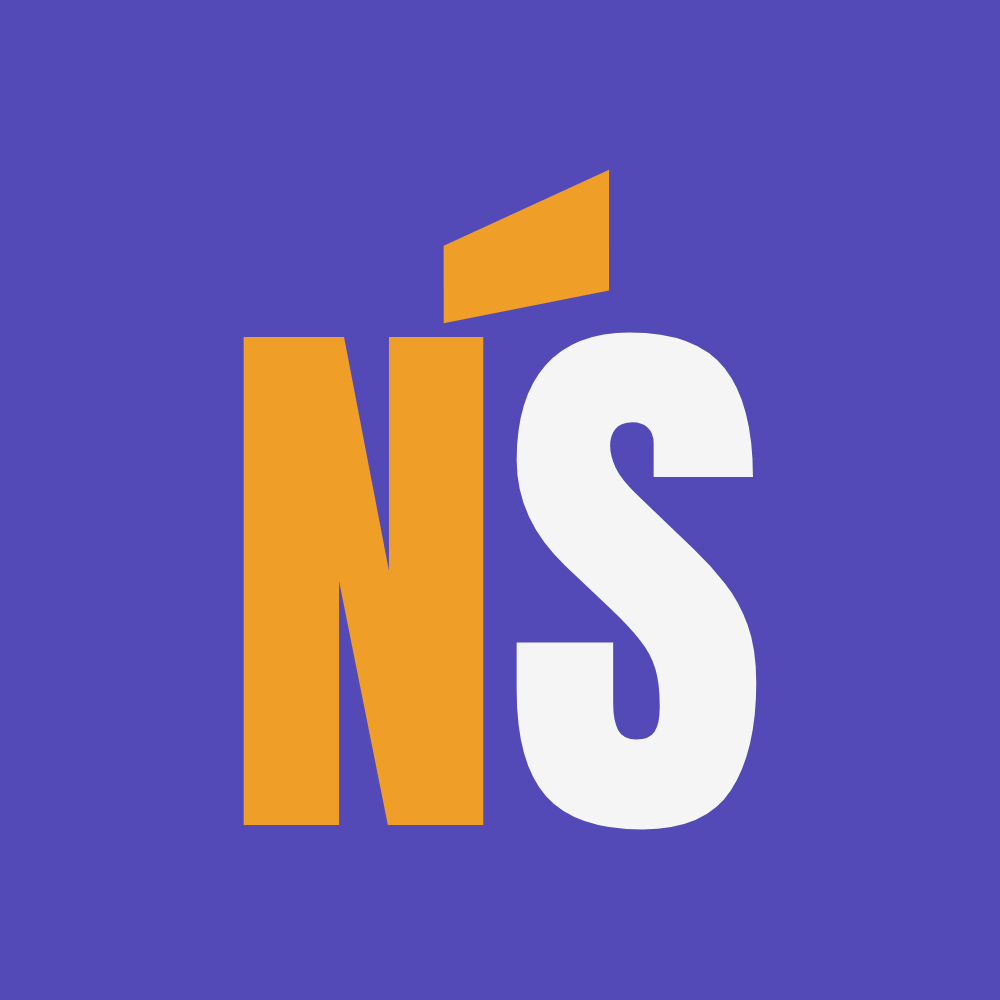
<style>
.page{position:relative;width:1000px;height:1000px;background:#534ab7}
.page>*{position:absolute;margin:0}
.t1{font:713px "Anton-Regular";color:#ef9f27}
.t2{font:568px "Anton-Regular";color:#ef9f27}
.t3{font:568px "Anton-Regular";color:#f5f5f5}
</style>
<div class="page">
<p class="t1" style="left:443px;top:169px;width:167px;height:155px">´</p>
<p class="t2" style="left:243px;top:332px;width:514px;height:498px">N<span class="t3">S</span></p>
</div>
